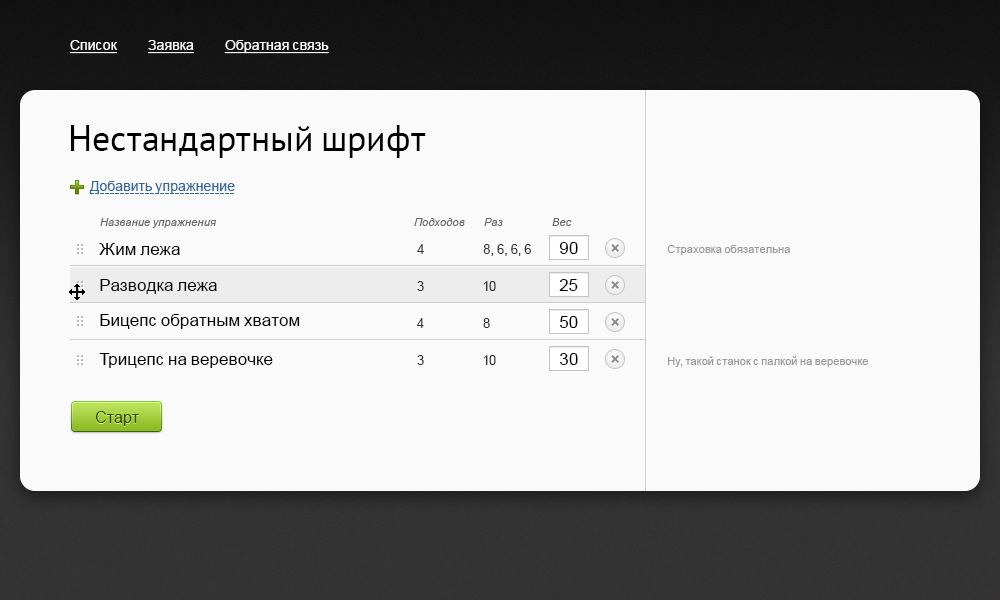
<style>
.page{position:relative;width:1000px;height:600px;background:#fafafa}
.page>*{position:absolute;margin:0}
.t1{font:14px "ArialMT";color:#fafafa;text-decoration:underline}
.t2{font:36px "PTSans-Regular";color:#000000}
.t3{font:14px "ArialMT";color:#336699}
.t4{font:11px "Arial-ItalicMT";color:#666666}
.t5{font:17px "ArialMT";color:#000000}
.t6{font:13px "ArialMT";color:#333333}
.t7{font:16px "Arial-BoldMT";color:#8a8a8a}
.t8{font:11px "ArialMT";color:#999999}
.t9{font:16px "ArialMT";color:#354412}
</style>
<div class="page">
<p class="t1" style="left:70px;top:40px;width:259px;height:14px">Список          Заявка          Обратная связь</p>
<p class="t2" style="left:71px;top:125px;width:355px;height:33px">Нестандартный шрифт</p>
<p class="t3" style="left:89px;top:181px;width:146px;height:13px">Добавить упражнение</p>
<p class="t4" style="left:100px;top:218px;width:117px;height:10px">Название упражнения</p>
<p class="t4" style="left:414px;top:218px;width:51px;height:8px">Подходов</p>
<p class="t4" style="left:484px;top:218px;width:19px;height:8px">Раз</p>
<p class="t4" style="left:552px;top:218px;width:20px;height:8px">Вес</p>
<p class="t5" style="left:99px;top:243px;width:81px;height:12px">Жим лежа</p>
<p class="t6" style="left:417px;top:244px;width:7px;height:10px">4</p>
<p class="t6" style="left:483px;top:244px;width:48px;height:12px">8, 6, 6, 6</p>
<p class="t5" style="left:559px;top:242px;width:19px;height:12px">90</p>
<p class="t7" style="left:611px;top:244px;width:8px;height:8px">×</p>
<p class="t8" style="left:667px;top:245px;width:123px;height:10px">Страховка обязательна</p>
<p class="t5" style="left:100px;top:279px;width:117px;height:15px">Разводка лежа</p>
<p class="t6" style="left:417px;top:281px;width:7px;height:10px">3</p>
<p class="t6" style="left:483px;top:281px;width:13px;height:10px">10</p>
<p class="t5" style="left:559px;top:279px;width:19px;height:12px">25</p>
<p class="t7" style="left:611px;top:281px;width:8px;height:8px">×</p>
<p class="t5" style="left:100px;top:314px;width:200px;height:15px">Бицепс обратным хватом</p>
<p class="t6" style="left:417px;top:318px;width:7px;height:10px">4</p>
<p class="t6" style="left:483px;top:318px;width:7px;height:10px">8</p>
<p class="t5" style="left:560px;top:316px;width:18px;height:12px">50</p>
<p class="t7" style="left:611px;top:318px;width:8px;height:8px">×</p>
<p class="t5" style="left:99px;top:353px;width:174px;height:15px">Трицепс на веревочке</p>
<p class="t5" style="left:560px;top:353px;width:18px;height:12px">30</p>
<p class="t6" style="left:417px;top:355px;width:7px;height:10px">3</p>
<p class="t6" style="left:483px;top:355px;width:13px;height:10px">10</p>
<p class="t7" style="left:611px;top:355px;width:8px;height:8px">×</p>
<p class="t8" style="left:668px;top:356px;width:200px;height:11px">Ну, такой станок с палкой на веревочке</p>
<p class="t9" style="left:95px;top:411px;width:44px;height:15px">Старт</p>
</div>
